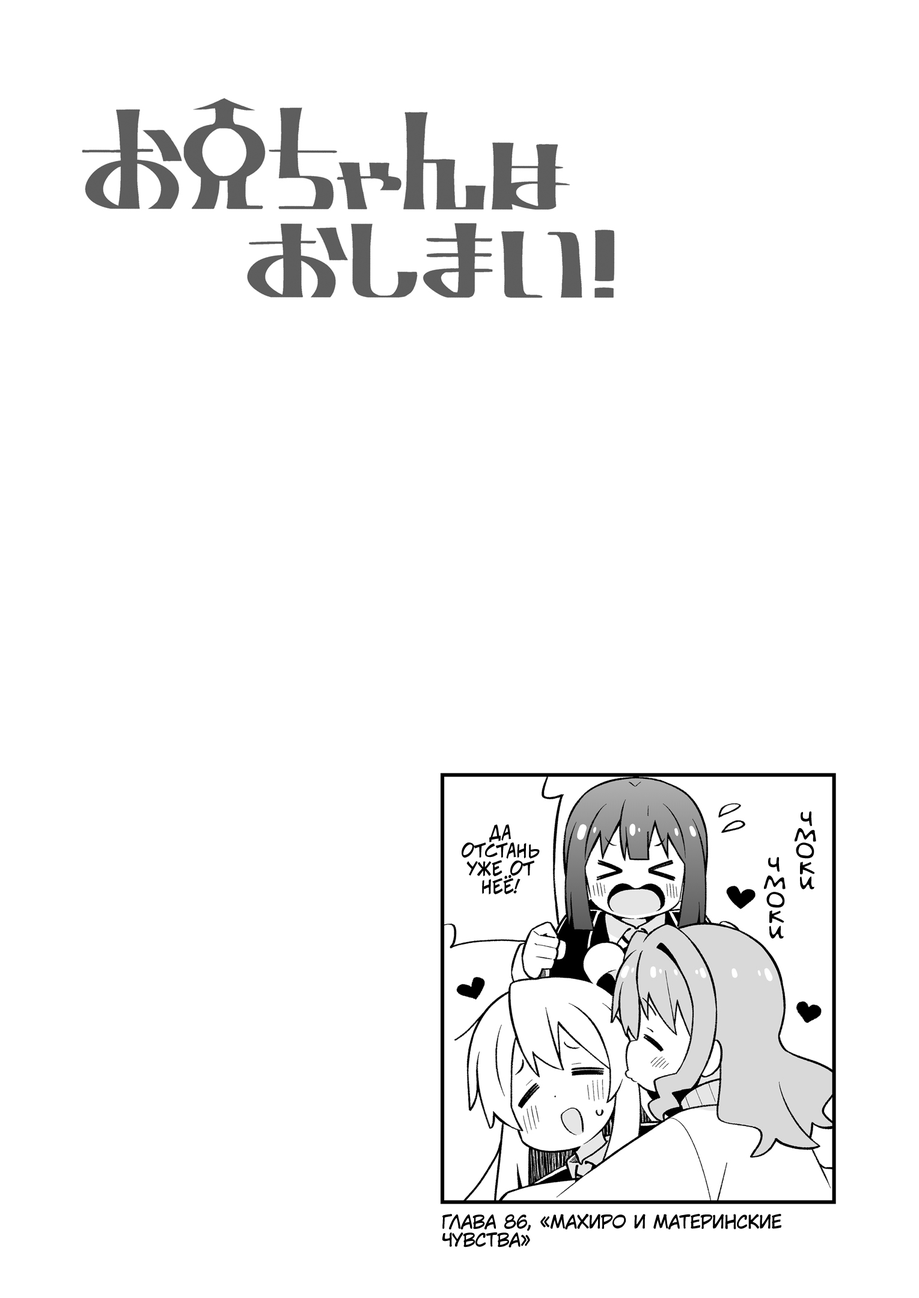
<style>
.page{position:relative;width:919px;height:1298px;background:#ffffff}
.page>*{position:absolute;margin:0}
.t1{font:28.8px "v_Augie";color:#000000}
.t2{font:18px "v_CCJeffCampbell";color:#000000;text-transform:uppercase}
.t3{font:18px "KuraiVoice2";color:#000000;text-transform:uppercase}
</style>
<div class="page">
<p class="t1" style="left:800px;top:811px;width:12px;height:15px">ч</p>
<p class="t2" style="left:461px;top:824px;width:79px;height:71px;text-align:center">Да<br>отстань<br>уже от<br>неё!</p>
<p class="t1" style="left:794px;top:828px;width:22px;height:14px">м</p>
<p class="t1" style="left:796px;top:842px;width:18px;height:17px">о</p>
<p class="t1" style="left:768px;top:857px;width:11px;height:15px">ч</p>
<p class="t1" style="left:800px;top:862px;width:15px;height:12px">к</p>
<p class="t1" style="left:764px;top:875px;width:21px;height:14px">м</p>
<p class="t1" style="left:800px;top:876px;width:14px;height:13px">и</p>
<p class="t1" style="left:766px;top:892px;width:19px;height:16px">о</p>
<p class="t1" style="left:769px;top:910px;width:15px;height:13px">к</p>
<p class="t1" style="left:769px;top:925px;width:15px;height:14px">и</p>
<p class="t3" style="left:442px;top:1214px;width:339px;height:33px">Глава 86, «Махиро и материнские<br>чувства»</p>
</div>
